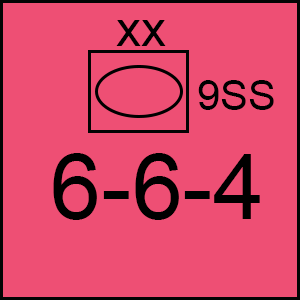
<style>
.page{position:relative;width:300px;height:300px;background:#ee4f74}
.page>*{position:absolute;margin:0}
.t1{font:50px "ArialMT";color:#000000}
.t2{font:41.7px "ArialMT";color:#000000}
.t3{font:91.7px "ArialMT";color:#000000}
</style>
<div class="page">
<p class="t1" style="left:116px;top:20px;width:50px;height:26px">xx</p>
<p class="t2" style="left:198px;top:80px;width:76px;height:30px">9SS</p>
<p class="t3" style="left:53px;top:153px;width:207px;height:67px">6-6-4</p>
</div>
